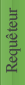
<style>
.page{position:relative;width:25px;height:85px}
.page>*{position:absolute;margin:0}
.t1{font:16px "TimesNewRomanPSMT";color:#404040}
</style>
<div class="page">
<p class="t1" style="left:5px;top:7px;width:16px;height:66px;rotate:-90deg">Requêteur</p>
</div>
